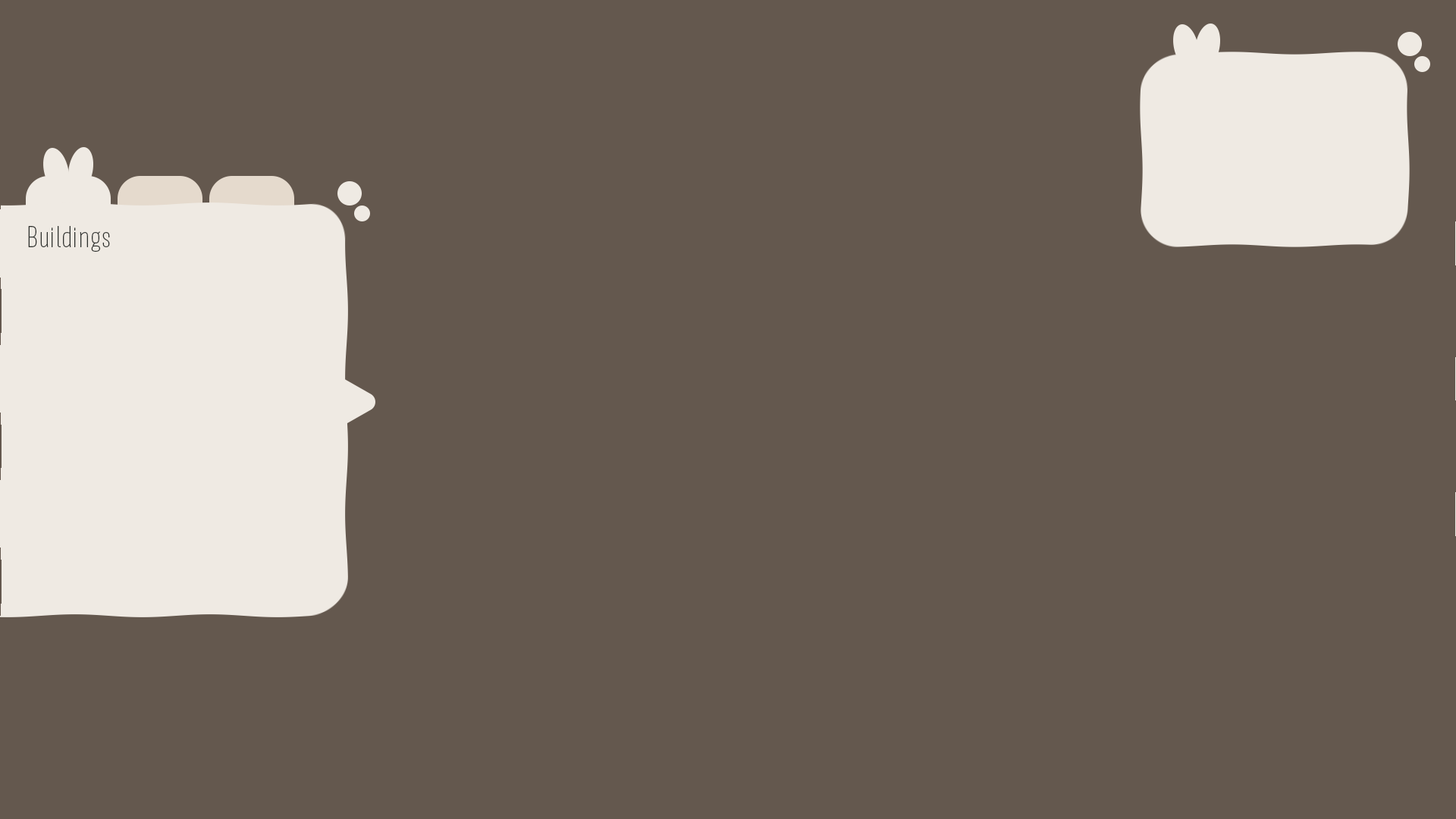
<style>
.page{position:relative;width:1456px;height:819px;background:#64584e}
.page>*{position:absolute;margin:0}
.t1{font:26.8px "AvoryILatn-Th";color:#2f312e}
</style>
<div class="page">
<p class="t1" style="left:28px;top:226px;width:82px;height:26px">Buildings</p>
</div>
